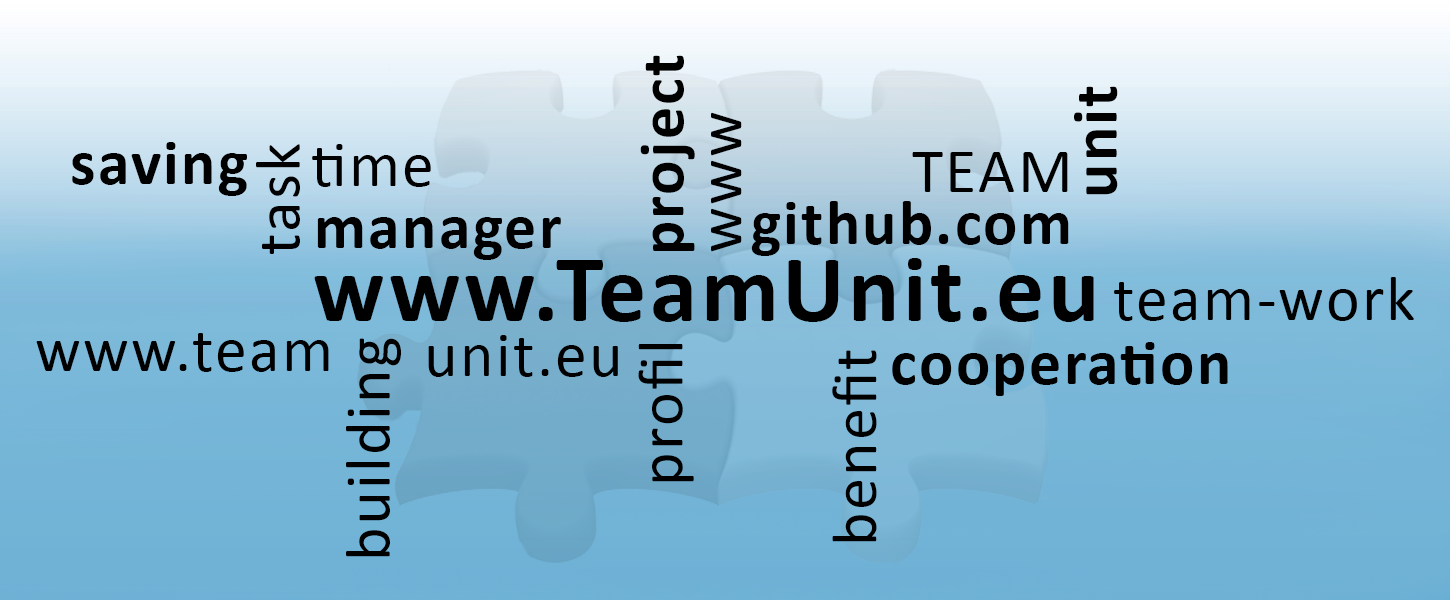
<style>
.page{position:relative;width:1450px;height:600px}
.page>*{position:absolute;margin:0}
.t1{font:64px "Calibri-Bold";letter-spacing:0.035em;color:#000000}
.t2{font:64px "Calibri";letter-spacing:0.035em;color:#000000}
.t3{font:96px "Calibri-Bold";letter-spacing:0.035em;color:#000000}
</style>
<div class="page">
<p class="t1" style="left:640px;top:55px;width:55px;height:196px;rotate:-90deg">project</p>
<p class="t1" style="left:1074px;top:86px;width:44px;height:109px;rotate:-90deg">unit</p>
<p class="t2" style="left:711px;top:112px;width:31px;height:140px;rotate:-90deg">www</p>
<p class="t1" style="left:72px;top:142px;width:175px;height:54px">saving</p>
<p class="t2" style="left:256px;top:144px;width:44px;height:110px;rotate:-90deg">task</p>
<p class="t2" style="left:312px;top:144px;width:119px;height:43px">time</p>
<p class="t2" style="left:912px;top:152px;width:156px;height:40px">TEAM</p>
<p class="t1" style="left:751px;top:201px;width:318px;height:55px">github.com</p>
<p class="t1" style="left:317px;top:217px;width:244px;height:43px">manager</p>
<p class="t3" style="left:314px;top:258px;width:780px;height:64px">www.TeamUnit.eu</p>
<p class="t2" style="left:1114px;top:277px;width:300px;height:44px">team-work</p>
<p class="t2" style="left:36px;top:333px;width:293px;height:39px">www.team</p>
<p class="t2" style="left:346px;top:338px;width:55px;height:219px;rotate:-90deg">building</p>
<p class="t2" style="left:428px;top:335px;width:190px;height:42px">unit.eu</p>
<p class="t1" style="left:892px;top:342px;width:336px;height:54px">cooperation</p>
<p class="t2" style="left:638px;top:344px;width:56px;height:138px;rotate:-90deg">profil</p>
<p class="t2" style="left:832px;top:350px;width:45px;height:192px;rotate:-90deg">benefit</p>
</div>
